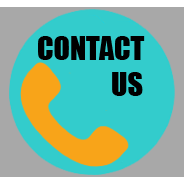
<style>
.page{position:relative;width:184px;height:184px;background:#33cccc}
.page>*{position:absolute;margin:0}
.t1{font:30px "Impact";color:#000000}
</style>
<div class="page">
<p class="t1" style="left:38px;top:36px;width:107px;height:60px">CONTACT<br>              US</p>
</div>
